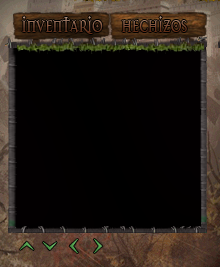
<style>
.page{position:relative;width:220px;height:267px}
.page>*{position:absolute;margin:0}
.t1{font:28.4px "Dark11";scale:0.71 1}
.t2{font:36px "Dark11";color:#54a34f;scale:1.43 1}
</style>
<div class="page">
<p class="t1" style="left:22px;top:16px;width:81px;height:18px">inventario</p>
<p class="t1" style="left:122px;top:16px;width:65px;height:16px">hechizos</p>
<p class="t2" style="left:69px;top:239px;width:34px;height:14px">&lt; &gt;</p>
</div>
